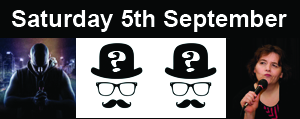
<style>
.page{position:relative;width:300px;height:119px;background:#060808}
.page>*{position:absolute;margin:0}
.t1{font:24px "Arial-BoldMT";color:#ffffff}
</style>
<div class="page">
<p class="t1" style="left:11px;top:10px;width:276px;height:22px">Saturday 5th September</p>
</div>
